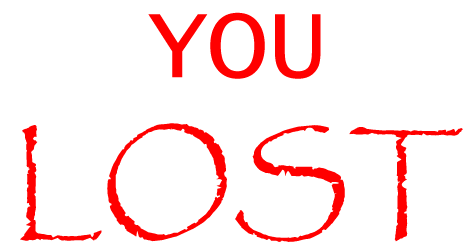
<style>
.page{position:relative;width:475px;height:250px;background:#ffffff}
.page>*{position:absolute;margin:0}
.t1{font:120px "Papyrus-Regular";color:#ff0000}
.t2{font:100px "LucidaConsole";color:#ff0000}
</style>
<div class="page">
<p class="t1" style="left:20px;top:12px;width:443px;height:230px;text-align:center"><span class="t2">YOU<br></span>LOST</p>
</div>
